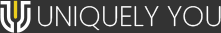
<style>
.page{position:relative;width:221px;height:33px;background:#333333}
.page>*{position:absolute;margin:0}
.t1{font:28px "Poppins-ExtraLight";color:#ffffff;text-transform:uppercase}
</style>
<div class="page">
<p class="t1" style="left:38px;top:6px;width:183px;height:25px">Uniquely You</p>
</div>
